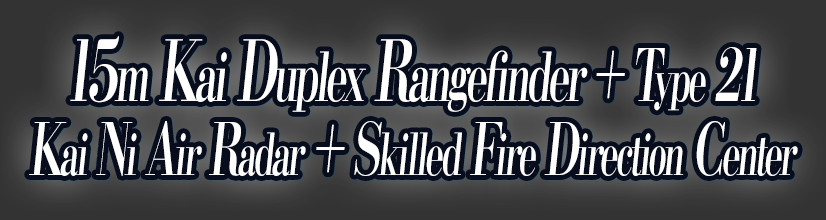
<style>
.page{position:relative;width:826px;height:220px;background:#070d1d}
.page>*{position:absolute;margin:0}
.t1{font:67.2px/74px "KochoStd-Heavy";letter-spacing:-0.08em;color:#ffffff;font-style:italic;scale:0.59 1}
.t2{font:84px/74px "KochoStd-Heavy";letter-spacing:-0.08em;color:#ffffff;font-style:italic;scale:0.59 1}
.t3{font:72px/74px "KochoStd-Heavy";letter-spacing:-0.08em;color:#ffffff;font-style:italic;scale:0.59 1}
.t4{font:57.6px/74px "KochoStd-Heavy";letter-spacing:-0.08em;color:#ffffff;font-style:italic;scale:0.59 1}
</style>
<div class="page">
<p class="t1" style="left:29px;top:36px;width:769px;height:140px;text-align:center"><span class="t2">15</span>m<span class="t2"> K</span>ai<span class="t2"> D</span>uplex<span class="t2"> R</span>angefinder <span class="t3">+ T</span><span class="t4">ype</span><span class="t3"> 21<br>K</span><span class="t4">ai</span><span class="t3"> N</span><span class="t4">i</span><span class="t3"> A</span><span class="t4">ir</span><span class="t3"> R</span><span class="t4">adar</span><span class="t3"> + S</span><span class="t4">killed</span><span class="t3"> F</span><span class="t4">ire</span><span class="t3"> D</span><span class="t4">irection</span><span class="t3"> C</span><span class="t4">enter</span></p>
</div>
